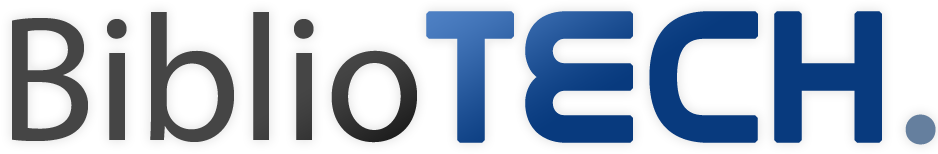
<style>
.page{position:relative;width:938px;height:154px;background:#ffffff}
.page>*{position:absolute;margin:0}
.t1{font:180px "MyriadPro-Regular"}
.t2{font:200px "Nasalization";font-weight:bold}
.t3{font:170px "ArialRoundedMTBold";font-weight:bold}
</style>
<div class="page">
<p class="t1" style="left:12px;top:11px;width:924px;height:134px">Biblio<span class="t2">TECH</span><span class="t3">.</span></p>
</div>
